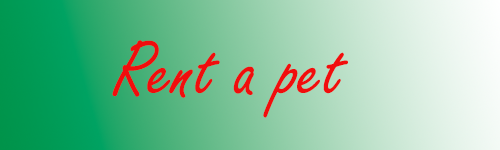
<style>
.page{position:relative;width:500px;height:150px}
.page>*{position:absolute;margin:0}
.t1{font:83.3px "FreestyleScript-Regular";color:#f10d0d}
</style>
<div class="page">
<p class="t1" style="left:112px;top:40px;width:236px;height:78px">Rent a pet</p>
</div>
